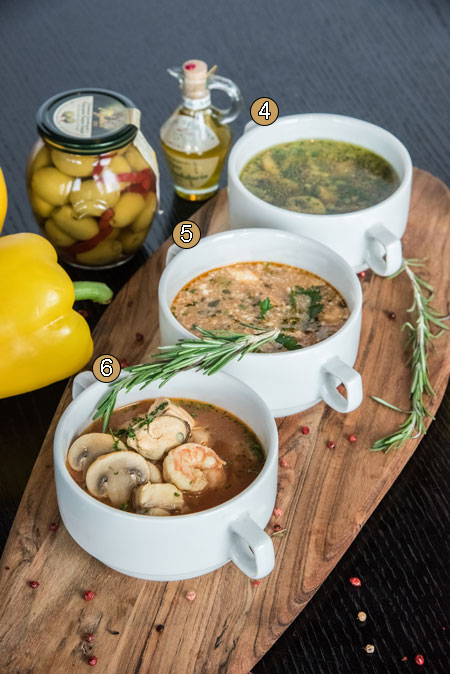
<style>
.page{position:relative;width:450px;height:674px}
.page>*{position:absolute;margin:0}
.t1{font:24px "ArialMT";color:#ffffff}
</style>
<div class="page">
<p class="t1" style="left:259px;top:102px;width:11px;height:17px">4</p>
<p class="t1" style="left:181px;top:225px;width:11px;height:17px">5</p>
<p class="t1" style="left:101px;top:359px;width:11px;height:17px">6</p>
</div>
